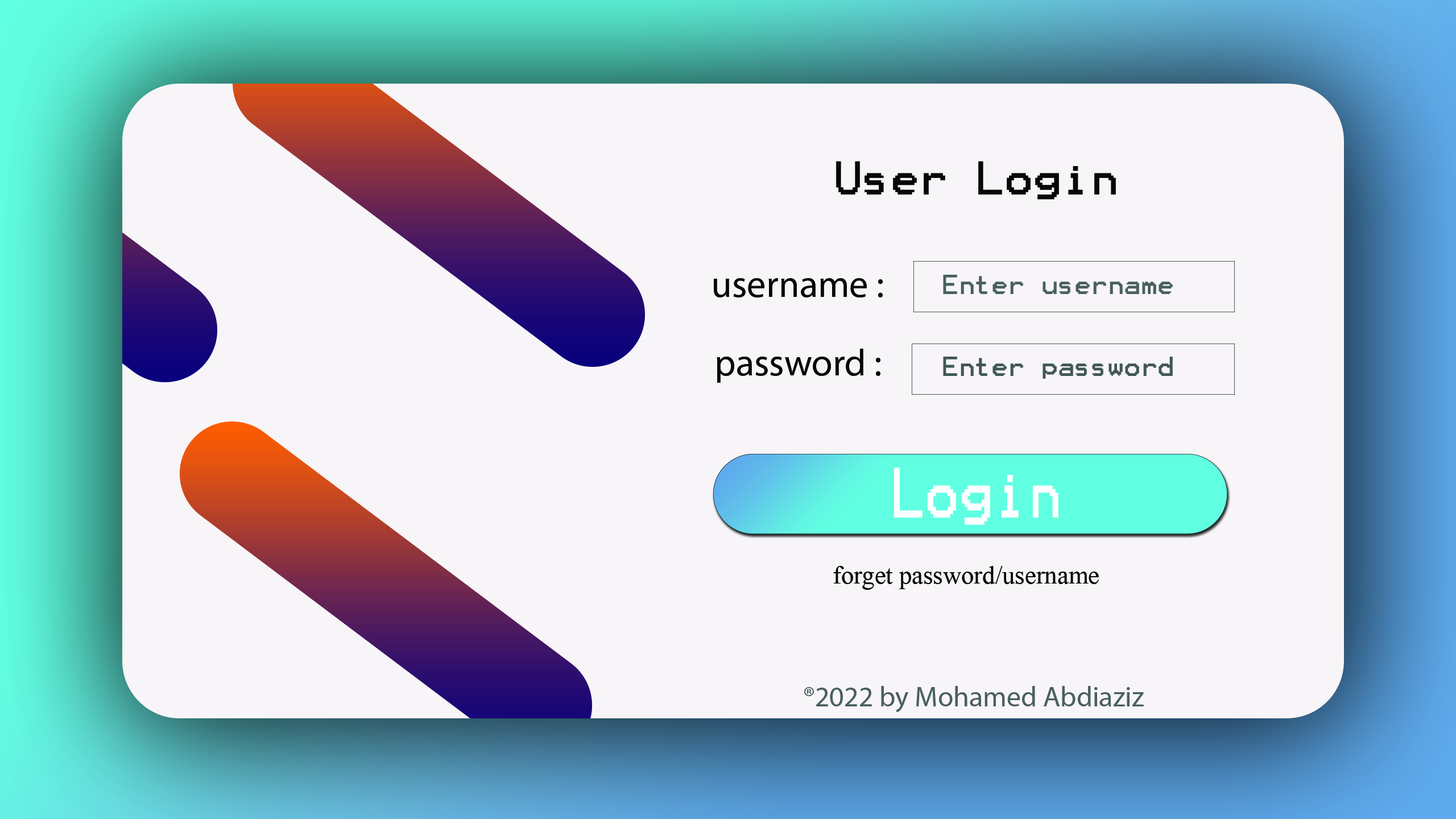
<style>
.page{position:relative;width:1456px;height:819px;background:#f8f5f8}
.page>*{position:absolute;margin:0}
.t1{font:37.9px "Terminal";color:#060808}
.t2{font:37.9px "MyriadPro-Regular";color:#060808}
.t3{font:22.1px "Terminal";color:#495f5f}
.t4{font:22.1px "Terminal";color:#405656}
.t5{font:57px "Terminal";color:#ffffff;scale:0.8 1}
.t6{font:37.9px "Microsoft-Himalaya";color:#060808}
.t7{font:28.4px "MyriadPro-Regular";color:#495f5f}
</style>
<div class="page">
<p class="t1" style="left:836px;top:161px;width:280px;height:39px">User Login</p>
<p class="t2" style="left:714px;top:278px;width:169px;height:19px">username :</p>
<p class="t3" style="left:943px;top:275px;width:230px;height:19px">Enter username</p>
<p class="t2" style="left:717px;top:349px;width:163px;height:34px">password :</p>
<p class="t4" style="left:943px;top:357px;width:230px;height:22px">Enter password</p>
<p class="t5" style="left:894px;top:468px;width:164px;height:57px">Login</p>
<p class="t6" style="left:833px;top:566px;width:266px;height:24px">forget password/username</p>
<p class="t7" style="left:804px;top:686px;width:340px;height:27px">®2022 by Mohamed Abdiaziz</p>
</div>
